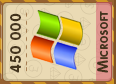
<style>
.page{position:relative;width:116px;height:84px;background:#eadab4}
.page>*{position:absolute;margin:0}
.t1{font:15px "RotondaC-Bold";letter-spacing:0.04em;color:#43341d;text-transform:uppercase}
.t2{font:15px "RotondaC-Bold";letter-spacing:0.04em;color:#43341d;font-variant:small-caps}
</style>
<div class="page">
<p class="t1" style="left:10px;top:13px;width:11px;height:60px;rotate:-90deg">450 000</p>
<p class="t2" style="left:97px;top:11px;width:11px;height:62px;rotate:-90deg">Microsoft</p>
</div>
